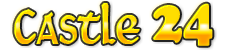
<style>
.page{position:relative;width:230px;height:50px;background:#ffffff}
.page>*{position:absolute;margin:0}
.t1{font:58.2px "Martel";scale:0.82 1}
.t2{font:58.2px "CooperBlackStd";scale:0.82 1}
</style>
<div class="page">
<p class="t1" style="left:14px;top:3px;width:126px;height:41px">Castle</p>
<p class="t2" style="left:153px;top:3px;width:60px;height:43px">24</p>
</div>
